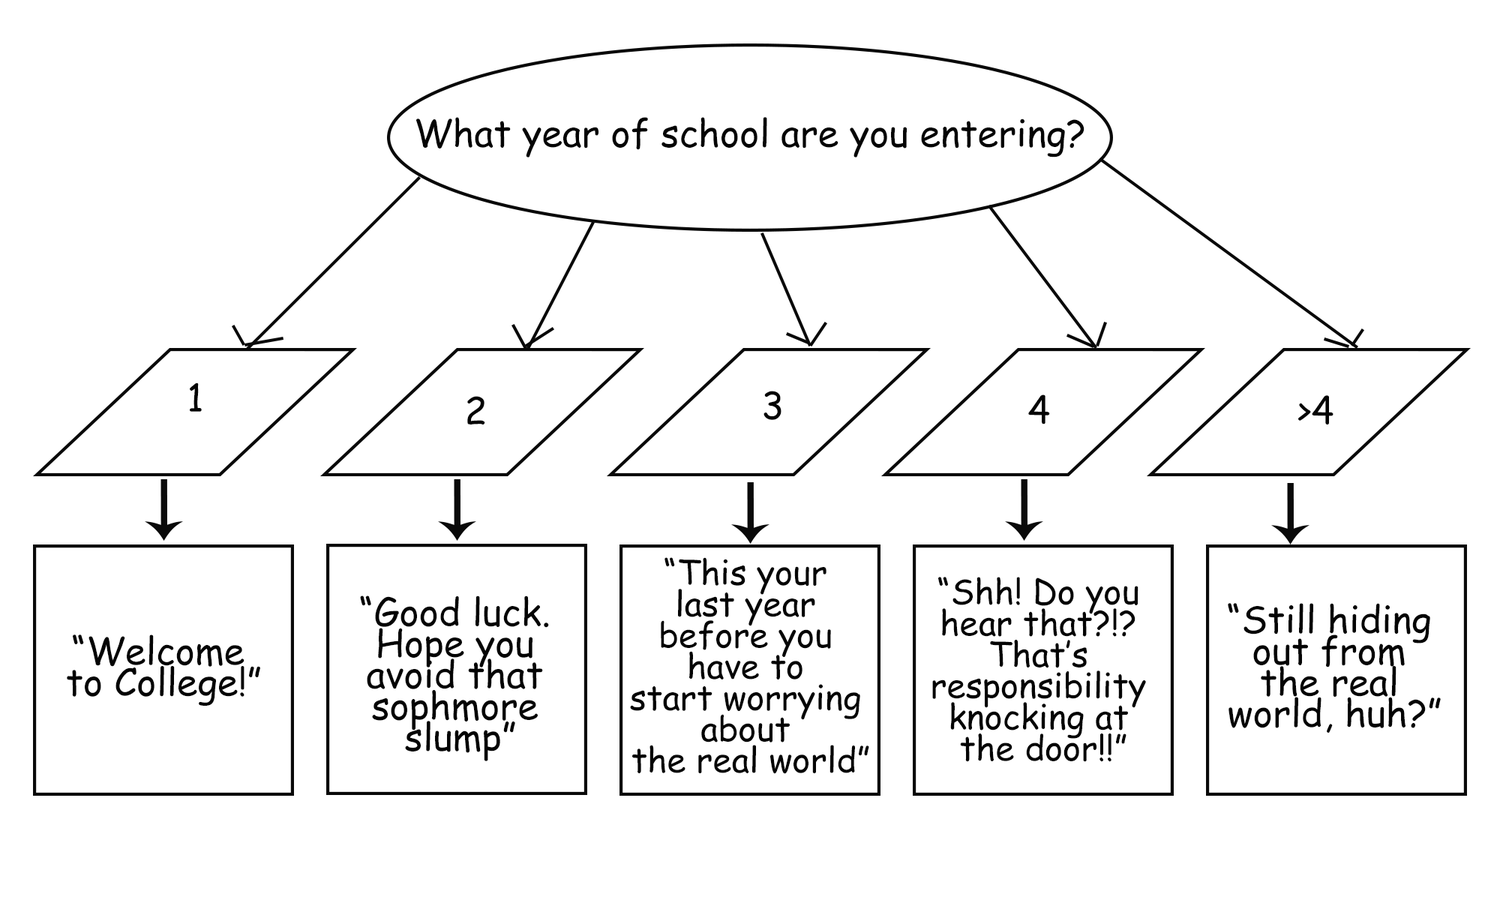
<style>
.page{position:relative;width:1500px;height:900px;background:#ffffff}
.page>*{position:absolute;margin:0}
.t1{font:37.5px "ComicSansMS";color:#040404}
.t2{font:9px/31.2px "ComicSansMS";color:#040404}
.t3{font:34.4px/31.2px "ComicSansMS";color:#040404}
.t4{font:37.5px/31.2px "ComicSansMS";color:#040404}
</style>
<div class="page">
<p class="t1" style="left:416px;top:117px;width:668px;height:41px">What year of school are you entering?</p>
<p class="t2" style="left:190px;top:382px;width:12px;height:30px;text-align:center">1</p>
<p class="t2" style="left:467px;top:396px;width:18px;height:28px;text-align:center">2</p>
<p class="t2" style="left:764px;top:391px;width:18px;height:29px;text-align:center">3</p>
<p class="t2" style="left:1028px;top:394px;width:22px;height:30px;text-align:center">4</p>
<p class="t2" style="left:1298px;top:395px;width:36px;height:29px;text-align:center">&gt;4</p>
<p class="t3" style="left:630px;top:557px;width:239px;height:217px;text-align:center">“This your <br>last year <br>before you <br>have to <br>start worrying <br>about <br>the real world”</p>
<p class="t3" style="left:932px;top:577px;width:214px;height:185px;text-align:center">“Shh! Do you <br>hear that?!? <br>That’s <br>responsibility <br>knocking at <br>the door!!”</p>
<p class="t2" style="left:360px;top:596px;width:189px;height:165px;text-align:center">“Good luck. <br>Hope you <br>avoid that <br>sophmore <br>slump”</p>
<p class="t4" style="left:1228px;top:603px;width:213px;height:130px;text-align:center">“Still hiding <br>out from <br>the real <br>world, huh?”</p>
<p class="t2" style="left:67px;top:634px;width:193px;height:72px;text-align:center">“Welcome <br>to College!”</p>
</div>
